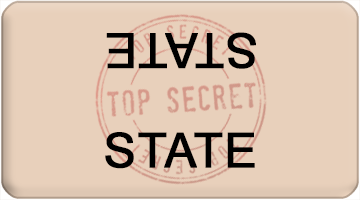
<style>
.page{position:relative;width:360px;height:200px;background:#e8d0bb}
.page>*{position:absolute;margin:0}
.t1{font:48px "ArialMT";color:#000000;font-weight:bold}
</style>
<div class="page">
<p class="t1" style="left:106px;top:32px;width:150px;height:37px;rotate:180deg">STATE</p>
<p class="t1" style="left:105px;top:132px;width:150px;height:37px">STATE</p>
</div>
